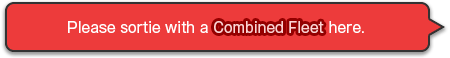
<style>
.page{position:relative;width:450px;height:58px;background:#ed3b3b}
.page>*{position:absolute;margin:0}
.t1{font:14px "GothicMB101Pro-Regular";color:#ffffff}
.t2{font:14px "GothicMB101Pro-Regular";color:#ffd3d3}
</style>
<div class="page">
<p class="t1" style="left:68px;top:21px;width:296px;height:12px">Please sortie with a <span class="t2">Combined Fleet </span>here.</p>
<p class="t1" style="left:68px;top:21px;width:296px;height:12px">Please sortie with a <span class="t2">Combined Fleet </span>here.</p>
</div>
